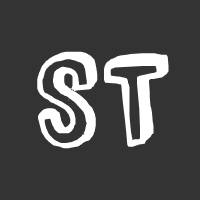
<style>
.page{position:relative;width:200px;height:200px;background:#333333}
.page>*{position:absolute;margin:0}
.t1{font:150px "ComicZineOT";color:#ffffff}
.t2{font:179.9px "ColonnaMT";color:#ffffff}
</style>
<div class="page">
<p class="t1" style="left:37px;top:51px;width:132px;height:98px"><span class="t2"><br></span>ST</p>
</div>
